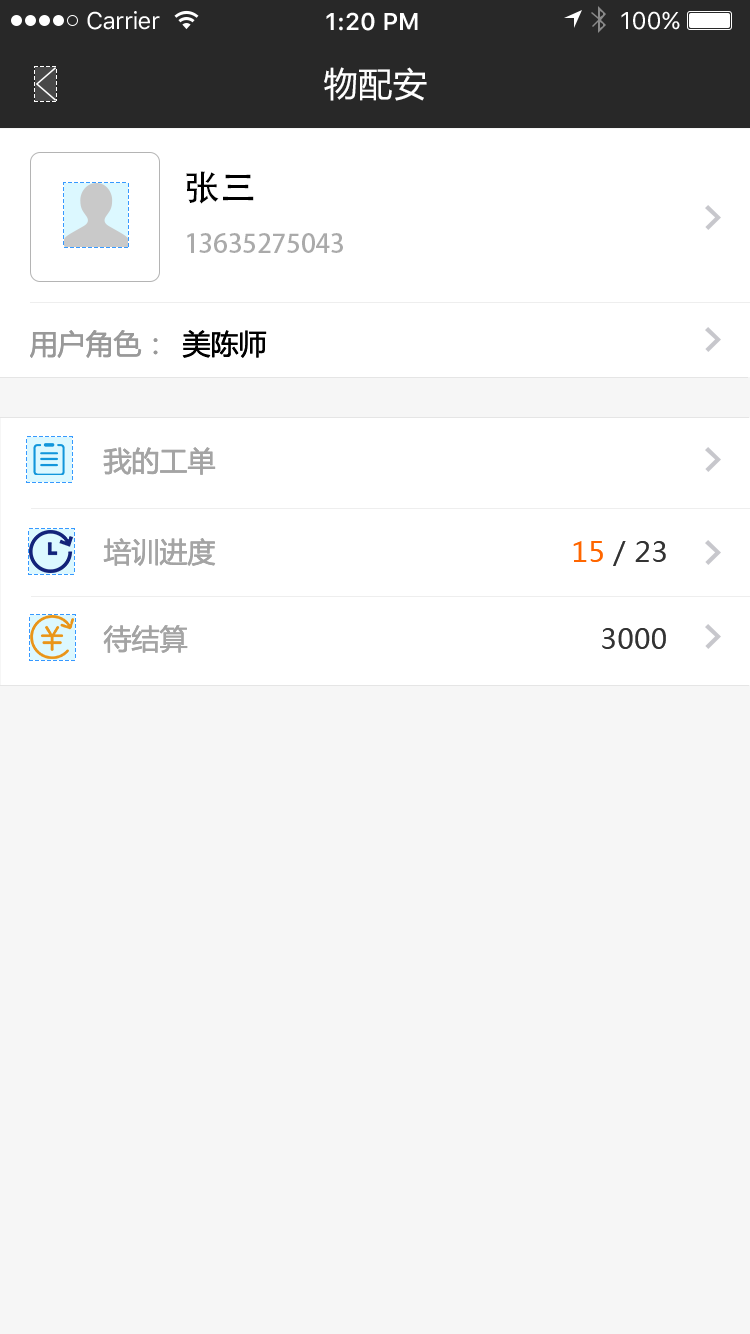
<style>
.page{position:relative;width:750px;height:1334px;background:#f6f6f6}
.page>*{position:absolute;margin:0}
.t1{font:24px "SFUIText-Regular";letter-spacing:-0.025em;color:#ffffff}
.t2{font:24px "SFUIText-Semibold";color:#ffffff}
.t3{font:24px "SFUIText-Regular";color:#ffffff}
.t4{font:34px "MicrosoftYaHei";letter-spacing:0.02em;color:#ffffff}
.t5{font:36px "AdobeHeitiStd-Regular";color:#000000}
.t6{font:26px "AdobeHeitiStd-Regular";color:#aaaaaa}
.t7{font:28px "MicrosoftYaHei";color:#999999}
.t8{font:28px "MicrosoftYaHei";color:#000000}
.t9{font:28px "MicrosoftYaHei";color:#a4a4a4}
.t10{font:28px "MicrosoftYaHei";color:#333333}
.t11{font:28px "MicrosoftYaHei";color:#ff6600}
</style>
<div class="page">
<p class="t1" style="left:87px;top:11px;width:73px;height:19px">Carrier</p>
<p class="t2" style="left:326px;top:12px;width:92px;height:19px">1:20 PM</p>
<p class="t3" style="left:621px;top:11px;width:59px;height:19px">100%</p>
<p class="t4" style="left:324px;top:67px;width:103px;height:34px">物配安</p>
<p class="t5" style="left:186px;top:171px;width:68px;height:33px">张三</p>
<p class="t6" style="left:187px;top:233px;width:156px;height:20px">13635275043</p>
<p class="t7" style="left:30px;top:330px;width:128px;height:28px">用户角色：</p>
<p class="t8" style="left:182px;top:330px;width:85px;height:28px">美陈师</p>
<p class="t9" style="left:103px;top:447px;width:113px;height:28px">我的工单</p>
<p class="t9" style="left:103px;top:538px;width:113px;height:28px">培训进度</p>
<p class="t10" style="left:573px;top:541px;width:93px;height:25px"><span class="t11">15</span> / 23</p>
<p class="t9" style="left:103px;top:625px;width:85px;height:28px">待结算</p>
<p class="t10" style="left:602px;top:628px;width:64px;height:21px">3000</p>
</div>
